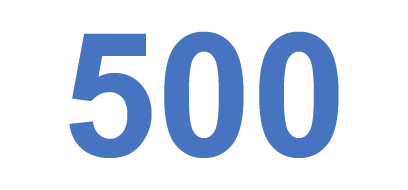
<style>
.page{position:relative;width:408px;height:190px;background:#ffffff}
.page>*{position:absolute;margin:0}
.t1{font:173px "ArialNarrow-Bold";color:#4774c0;text-transform:uppercase;scale:1.2 1}
</style>
<div class="page">
<p class="t1" style="left:69px;top:31px;width:270px;height:127px">500</p>
</div>
